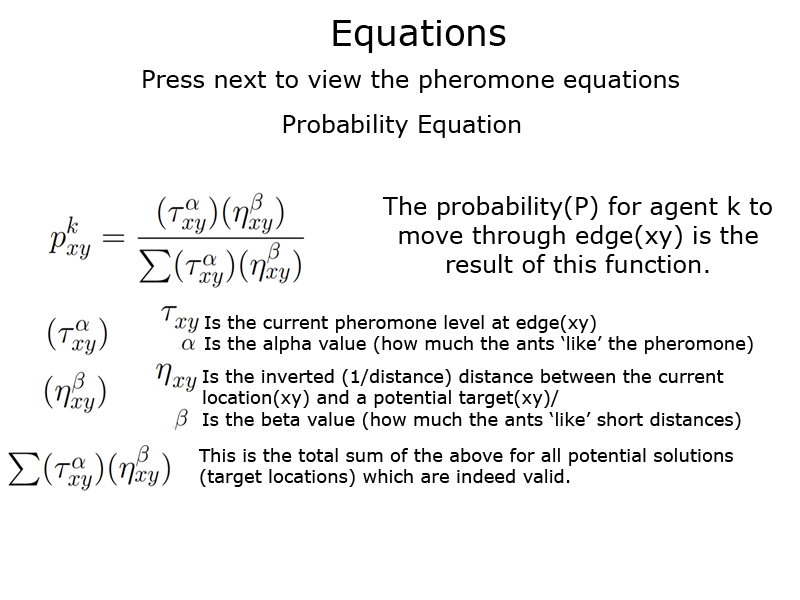
<style>
.page{position:relative;width:800px;height:600px;background:#ffffff}
.page>*{position:absolute;margin:0}
.t1{font:36px "Verdana";color:#000000}
.t2{font:24px "Verdana";color:#000000}
.t3{font:18px "Verdana";color:#000000}
</style>
<div class="page">
<p class="t1" style="left:333px;top:20px;width:173px;height:33px">Equations</p>
<p class="t2" style="left:143px;top:69px;width:536px;height:24px">Press next to view the pheromone equations</p>
<p class="t2" style="left:283px;top:114px;width:238px;height:24px">Probability Equation</p>
<p class="t2" style="left:383px;top:196px;width:389px;height:77px;text-align:center">The probability(P) for agent k to move through edge(xy) is the result of this function.</p>
<p class="t3" style="left:205px;top:315px;width:548px;height:39px">Is the current pheromone level at edge(xy)<br>Is the alpha value (how much the ants ‘like’ the pheromone)</p>
<p class="t3" style="left:203px;top:369px;width:538px;height:61px">Is the inverted (1/distance) distance between the current location(xy) and a potential target(xy)/<br>Is the beta value (how much the ants ‘like’ short distances)</p>
<p class="t3" style="left:198px;top:448px;width:535px;height:39px">This is the total sum of the above for all potential solutions (target locations) which are indeed valid.</p>
</div>
